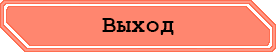
<style>
.page{position:relative;width:276px;height:52px;background:#ff866f}
.page>*{position:absolute;margin:0}
.t1{font:24px "CourierNewPS-BoldMT";color:#000000}
</style>
<div class="page">
<p class="t1" style="left:102px;top:18px;width:72px;height:17px">Выход</p>
</div>
